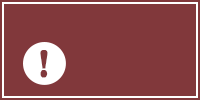
<style>
.page{position:relative;width:200px;height:100px;background:#81383b}
.page>*{position:absolute;margin:0}
.t1{font:34.1px "BernardMT-Condensed";color:#81383b;font-weight:bold}
</style>
<div class="page">
<p class="t1" style="left:40px;top:50px;width:8px;height:28px">!</p>
</div>
